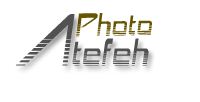
<style>
.page{position:relative;width:200px;height:102px;background:#ffffff}
.page>*{position:absolute;margin:0}
.t1{font:42px "AstronBoyVideo";color:#515151}
.t2{font:80px "AstronBoyVideo";color:#515151}
.t3{font:35px "AstronBoyVideo";color:#675503}
</style>
<div class="page">
<p class="t1" style="left:15px;top:14px;width:134px;height:52px"><span class="t2">A</span>tefeh</p>
<p class="t3" style="left:76px;top:13px;width:76px;height:24px;rotate:-1deg">Photo</p>
</div>
